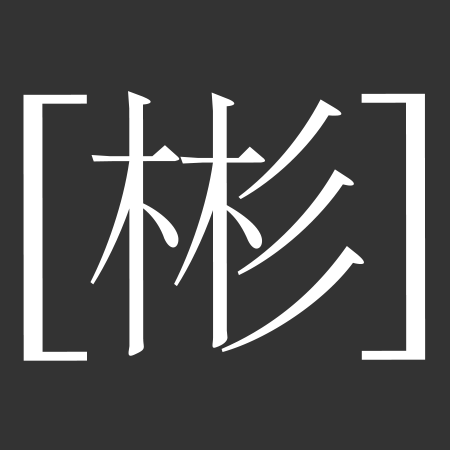
<style>
.page{position:relative;width:450px;height:450px;background:#333333}
.page>*{position:absolute;margin:0}
.t1{font:304.1px "AdobeMyungjoStd-Medium";letter-spacing:-0.1em;color:#ffffff}
</style>
<div class="page">
<p class="t1" style="left:23px;top:91px;width:403px;height:270px">[彬]</p>
</div>
